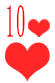
<style>
.page{position:relative;width:55px;height:83px;background:#ffffff}
.page>*{position:absolute;margin:0}
.t1{font:42px "DFKaiShu-SB-Estd-BF";color:#ff0000;scale:0.5 1}
</style>
<div class="page">
<p class="t1" style="left:7px;top:5px;width:18px;height:33px">10</p>
</div>
